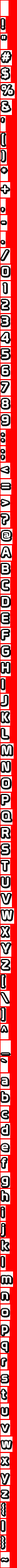
<style>
.page{position:relative;width:17px;height:1568px;background:#ff0000}
.page>*{position:absolute;margin:0}
.t1{font:12.4px/16.5px "Prototype";color:#ffffff}
</style>
<div class="page">
<p class="t1" style="left:1px;top:19px;width:12px;height:1542px">!<br>"<br>#<br>$<br>%<br>&amp;<br>'<br>(<br>)<br>*<br>+<br>,<br>-<br>.<br>/<br>0<br> 1<br>2<br>3<br>4<br>5<br>6<br>7<br>8<br>9<br>:<br>;<br>&lt;<br>=<br>&gt;<br>?<br>@<br>A<br>B<br>C<br>D<br>E<br>F<br>G<br>H<br>I<br>J<br>K<br>L<br>M<br>N<br>O<br>P<br>Q<br>R<br>S<br>T<br>U<br>V<br>W<br>X<br>Y<br>Z<br>[<br>\<br>]<br>^<br>_<br>`<br>a<br>b<br>c<br>d<br>e<br>f<br>g<br>h<br>i<br>j<br>k<br>l<br>m<br>n<br>o<br>p<br>q<br>r<br>s<br>t<br>u<br>v<br>w<br>x<br>y<br>z<br>{<br>|<br>}<br>~</p>
</div>
